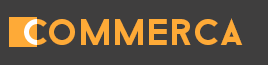
<style>
.page{position:relative;width:268px;height:65px;background:#3f3e3e}
.page>*{position:absolute;margin:0}
.t1{font:38px "BaronNeue-Bold";color:#feaa37}
</style>
<div class="page">
<p class="t1" style="left:24px;top:18px;width:219px;height:27px">commerca</p>
</div>
